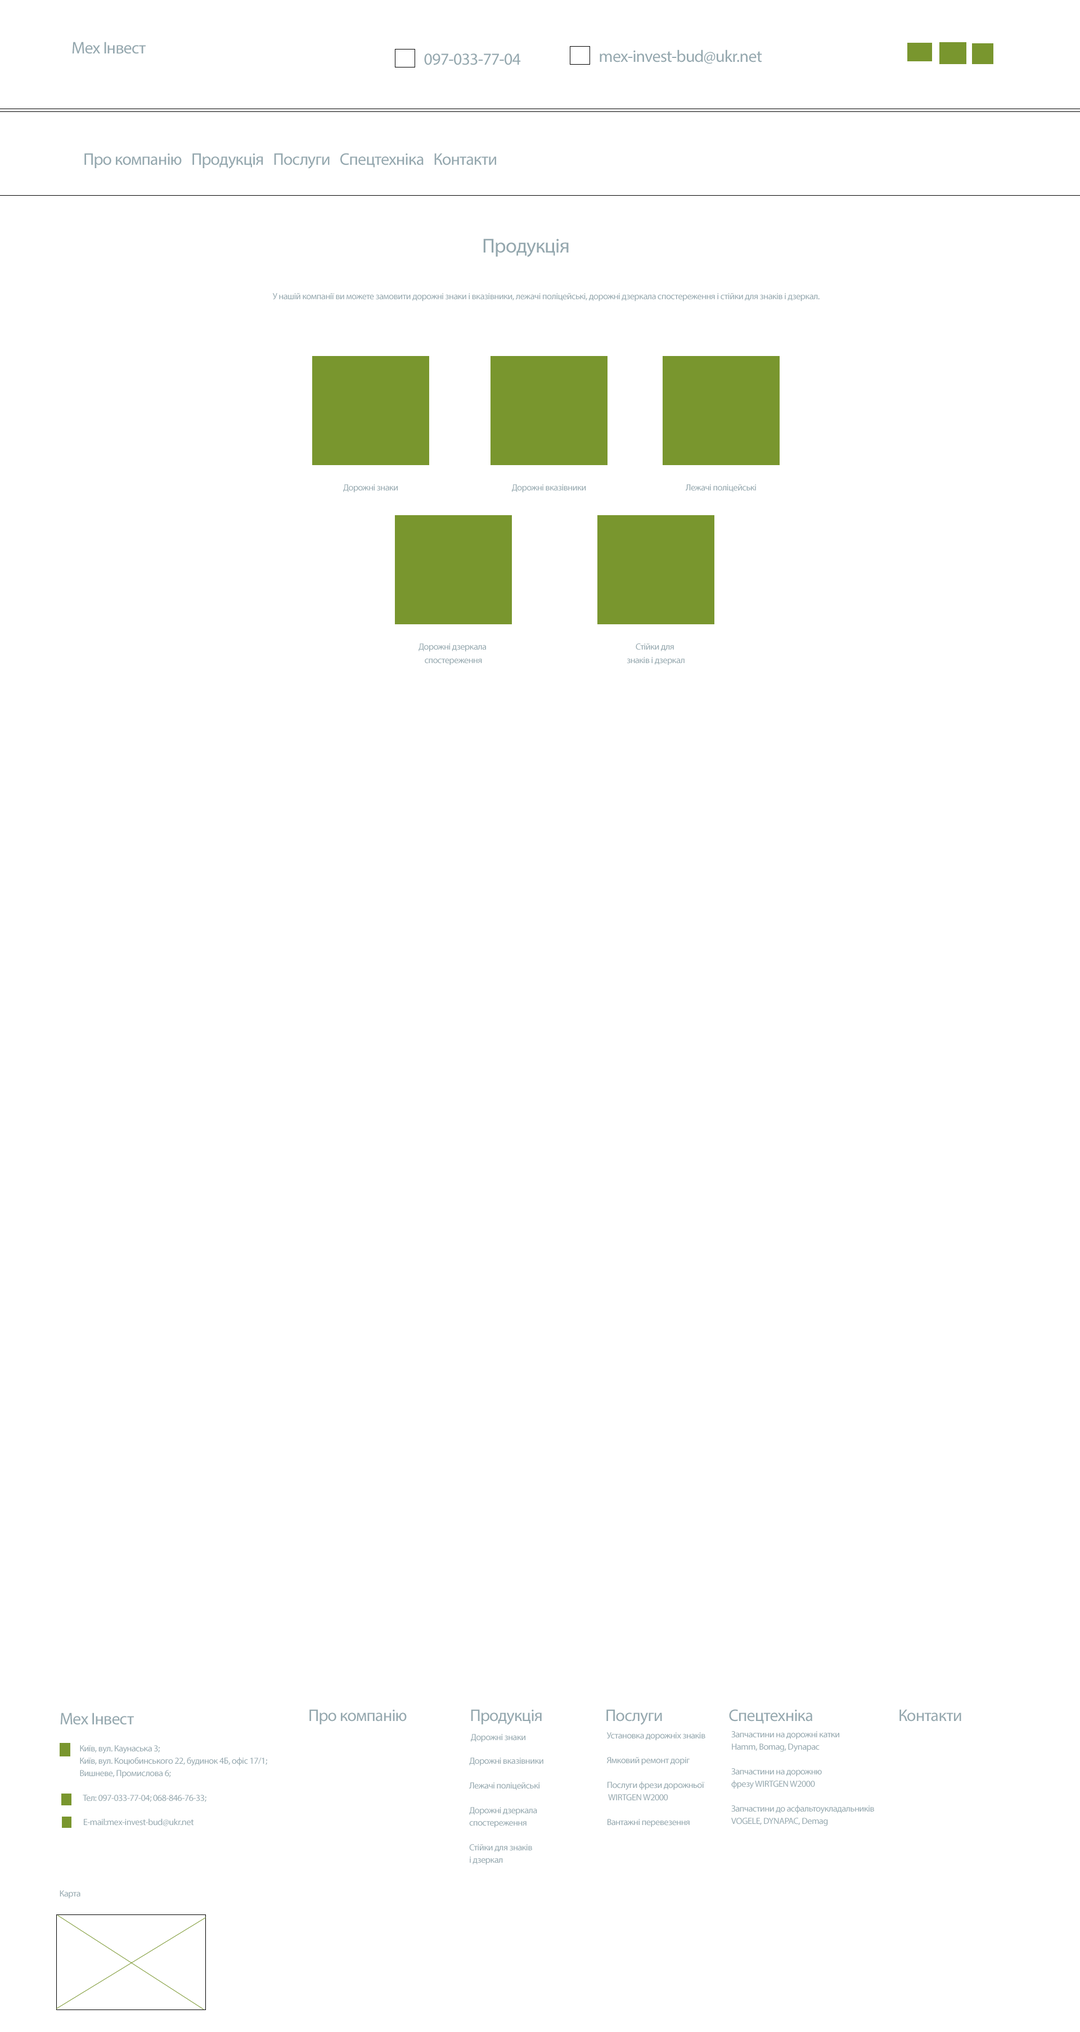
<style>
.page{position:relative;width:1080px;height:2032px;background:#ffffff}
.page>*{position:absolute;margin:0}
.t1{font:16.9px "MyriadPro-Regular";letter-spacing:-0.025em;color:#94a7ae}
.t2{font:20.2px "MyriadPro-Regular";letter-spacing:-0.025em;color:#94a7ae}
.t3{font:9px "MyriadPro-Regular";letter-spacing:-0.025em;color:#94a7ae}
.t4{font:9px/13.5px "MyriadPro-Regular";letter-spacing:-0.025em;color:#94a7ae}
.t5{font:9px/12.4px "MyriadPro-Regular";letter-spacing:-0.025em;color:#94a7ae}
</style>
<div class="page">
<p class="t1" style="left:72px;top:42px;width:74px;height:12px">Мех Інвест</p>
<p class="t1" style="left:424px;top:53px;width:97px;height:12px">097-033-77-04</p>
<p class="t1" style="left:600px;top:49px;width:162px;height:15px">mex-invest-bud@ukr.net</p>
<p class="t1" style="left:84px;top:153px;width:412px;height:16px">Про компанію   Продукція   Послуги   Спецтехніка   Контакти</p>
<p class="t2" style="left:483px;top:238px;width:86px;height:19px">Продукція</p>
<p class="t3" style="left:272px;top:293px;width:548px;height:8px">У нашій компанії ви можете замовити дорожні знаки і вказівники, лежачі поліцейські, дорожні дзеркала спостереження і стійки для знаків і дзеркал.</p>
<p class="t3" style="left:343px;top:484px;width:55px;height:9px">Дорожні знаки</p>
<p class="t3" style="left:512px;top:484px;width:74px;height:9px">Дорожні вказівники</p>
<p class="t3" style="left:686px;top:484px;width:70px;height:8px">Лежачі поліцейські</p>
<p class="t4" style="left:418px;top:643px;width:68px;height:22px;text-align:center">Дорожні дзеркала <br>спостереження</p>
<p class="t4" style="left:627px;top:643px;width:58px;height:22px;text-align:center">Стійки для <br>знаків і дзеркал</p>
<p class="t1" style="left:309px;top:1709px;width:652px;height:16px">Про компанію                    Продукція                    Послуги                     Спецтехніка                           Контакти</p>
<p class="t1" style="left:60px;top:1713px;width:74px;height:12px">Мех Інвест</p>
<p class="t5" style="left:606px;top:1732px;width:99px;height:95px">Установка дорожніх знаків<br><br>Ямковий ремонт доріг<br><br>Послуги фрези дорожньої<br> WIRTGEN W2000<br><br>Вантажні перевезення</p>
<p class="t5" style="left:731px;top:1731px;width:143px;height:95px">Запчастини на дорожні катки <br>Hamm, Bomag, Dynapac<br><br>Запчастини на дорожню <br>фрезу WIRTGEN W2000<br><br>Запчастини до асфальтоукладальників <br>VOGELE, DYNAPAC, Demag</p>
<p class="t5" style="left:80px;top:1745px;width:187px;height:34px">Київ, вул. Каунаська 3; <br>Київ, вул. Коцюбинського 22, будинок 4Б, офіс 17/1; <br>Вишневе, Промислова 6;</p>
<p class="t3" style="left:471px;top:1734px;width:54px;height:9px">Дорожні знаки</p>
<p class="t5" style="left:469px;top:1758px;width:74px;height:107px">Дорожні вказівники<br><br>Лежачі поліцейські<br><br>Дорожні дзеркала <br>спостереження<br><br>Стійки для знаків <br>і дзеркал</p>
<p class="t3" style="left:83px;top:1795px;width:123px;height:7px">Тел: 097-033-77-04; 068-846-76-33;</p>
<p class="t3" style="left:84px;top:1818px;width:110px;height:8px">E-mail:mex-invest-bud@ukr.net</p>
<p class="t3" style="left:60px;top:1890px;width:20px;height:9px">Карта</p>
</div>
